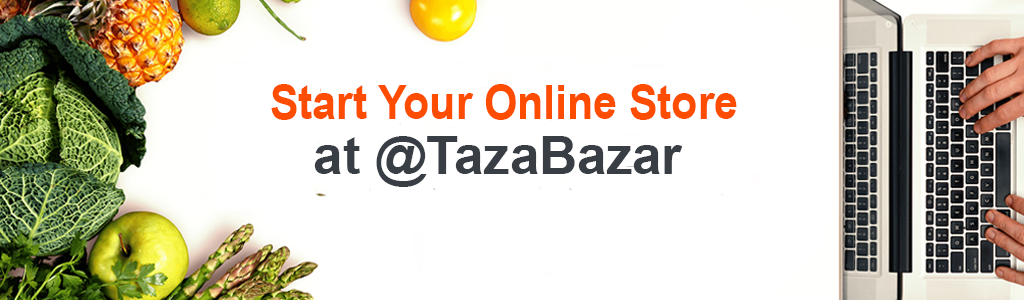
<style>
.page{position:relative;width:1024px;height:300px;background:#ffffff}
.page>*{position:absolute;margin:0}
.t1{font:46.8px "Arial-BoldMT";color:#fe4c01;scale:0.91 1}
.t2{font:52.5px "Arial-BoldMT";color:#393d44}
</style>
<div class="page">
<p class="t1" style="left:271px;top:84px;width:466px;height:36px">Start Your Online Store</p>
<p class="t2" style="left:314px;top:136px;width:369px;height:51px">at @TazaBazar</p>
</div>
